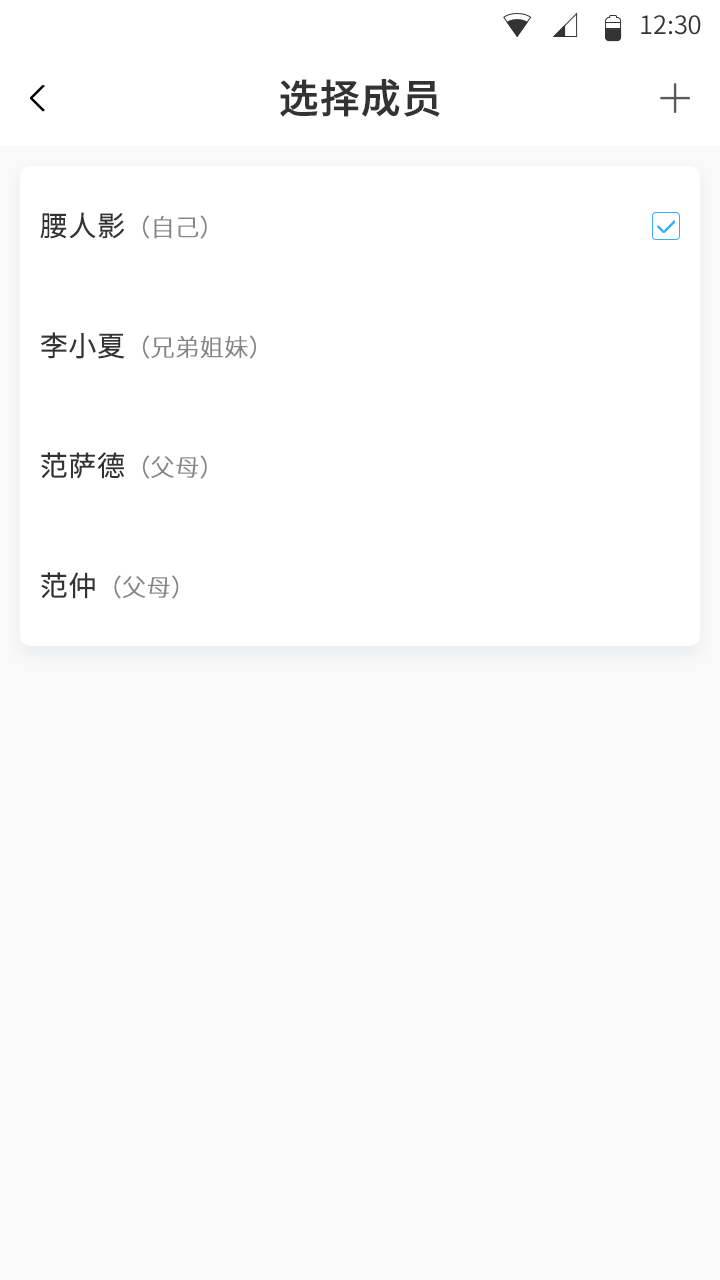
<style>
.page{position:relative;width:720px;height:1280px;background:#f9f9f9}
.page>*{position:absolute;margin:0}
.t1{font:25.4px "SourceHanSansCN-Normal";color:#333333}
.t2{font:40px "SourceHanSansCN-Medium";color:#333333;font-weight:bold}
.t3{font:24px "SourceHanSansCN-Light";color:#858585;font-weight:bold}
.t4{font:28px "SourceHanSansCN-Normal";color:#333333;font-weight:bold}
</style>
<div class="page">
<p class="t1" style="left:641px;top:15px;width:60px;height:20px">12:30</p>
<p class="t2" style="left:280px;top:79px;width:160px;height:38px">选择成员</p>
<p class="t3" style="left:40px;top:212px;width:167px;height:27px"><span class="t4">腰人影</span>（自己）</p>
<p class="t3" style="left:41px;top:332px;width:215px;height:27px"><span class="t4">李小夏</span>（兄弟姐妹）</p>
<p class="t3" style="left:41px;top:452px;width:166px;height:27px"><span class="t4">范萨德</span>（父母）</p>
<p class="t3" style="left:41px;top:572px;width:138px;height:27px"><span class="t4">范仲</span>（父母）</p>
</div>
